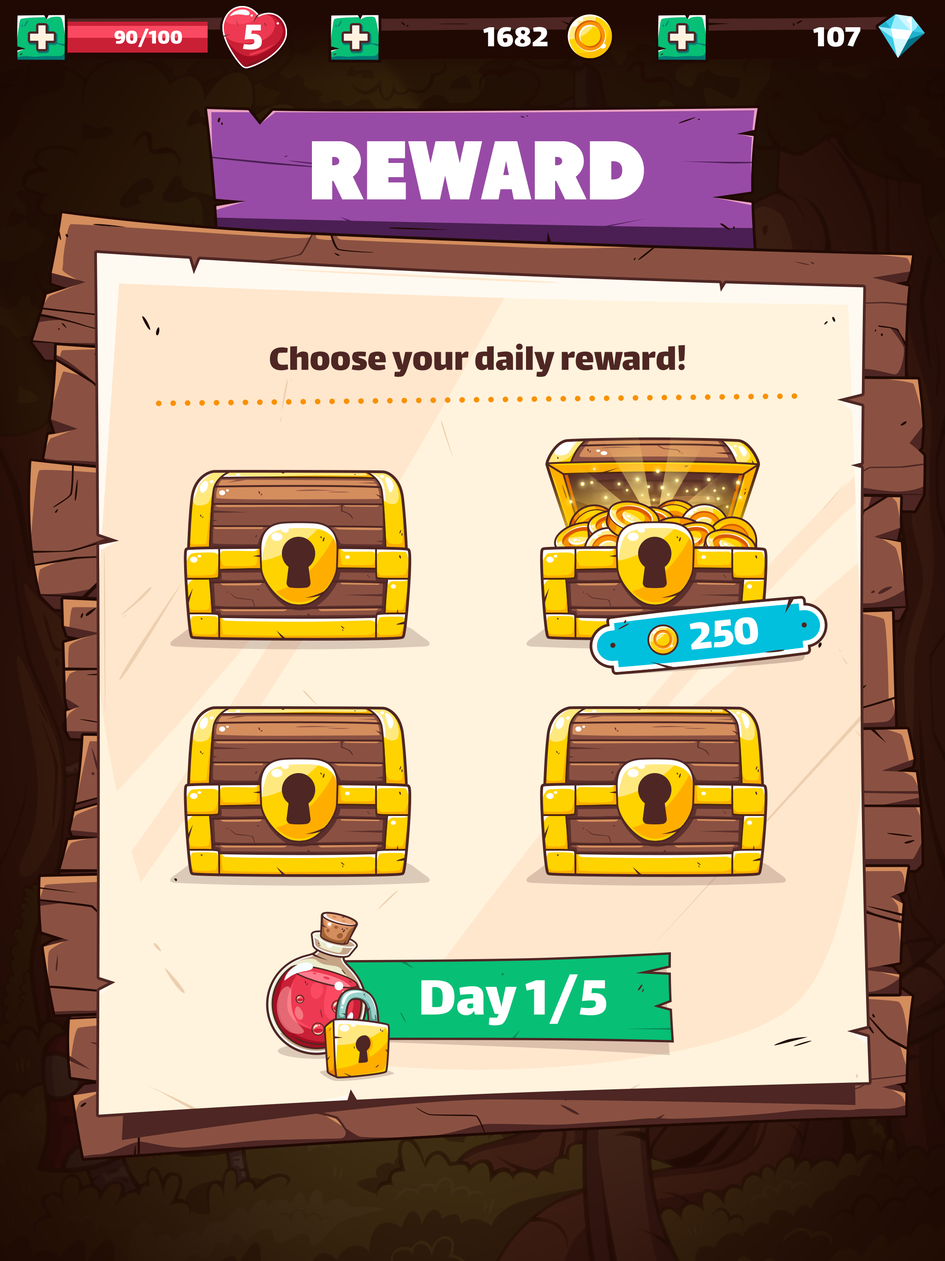
<style>
.page{position:relative;width:945px;height:1261px}
.page>*{position:absolute;margin:0}
.t1{font:57.2px "Lalezar-Regular";color:#fff3dd}
.t2{font:22.2px "Lalezar-Regular";color:#ffffff}
.t3{font:42.5px "Lalezar-Regular";color:#ffffff}
.t4{font:33.2px "Lalezar-Regular";color:#ffffff}
.t5{font:83.1px "Tondu-Beta";color:#ffffff;text-transform:uppercase}
.t6{font:38.8px "Lalezar-Regular";color:#4e2623}
.t7{font:46.2px "Lalezar-Regular";color:#ffffff}
.t8{font:60px "Lalezar-Regular";color:#ffffff}
</style>
<div class="page">
<p class="t1" style="left:30px;top:25px;width:24px;height:24px">+</p>
<p class="t2" style="left:114px;top:29px;width:68px;height:18px">90/100</p>
<p class="t3" style="left:243px;top:24px;width:19px;height:26px">5</p>
<p class="t1" style="left:344px;top:25px;width:24px;height:24px">+</p>
<p class="t4" style="left:483px;top:27px;width:65px;height:20px">1682</p>
<p class="t1" style="left:670px;top:25px;width:24px;height:24px">+</p>
<p class="t4" style="left:813px;top:27px;width:48px;height:20px">107</p>
<p class="t5" style="left:312px;top:141px;width:332px;height:59px">reward</p>
<p class="t6" style="left:270px;top:343px;width:416px;height:34px">Choose your daily reward!</p>
<p class="t7" style="left:690px;top:617px;width:68px;height:33px;rotate:-6deg">250</p>
<p class="t8" style="left:421px;top:975px;width:186px;height:51px">Day 1/5</p>
</div>
